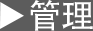
<style>
.page{position:relative;width:93px;height:31px;background:#5c5c5c}
.page>*{position:absolute;margin:0}
.t1{font:33.4px "AdobeHeitiStd-Regular";color:#ffffff}
</style>
<div class="page">
<p class="t1" style="left:30px;top:0px;width:63px;height:31px">管理</p>
</div>
